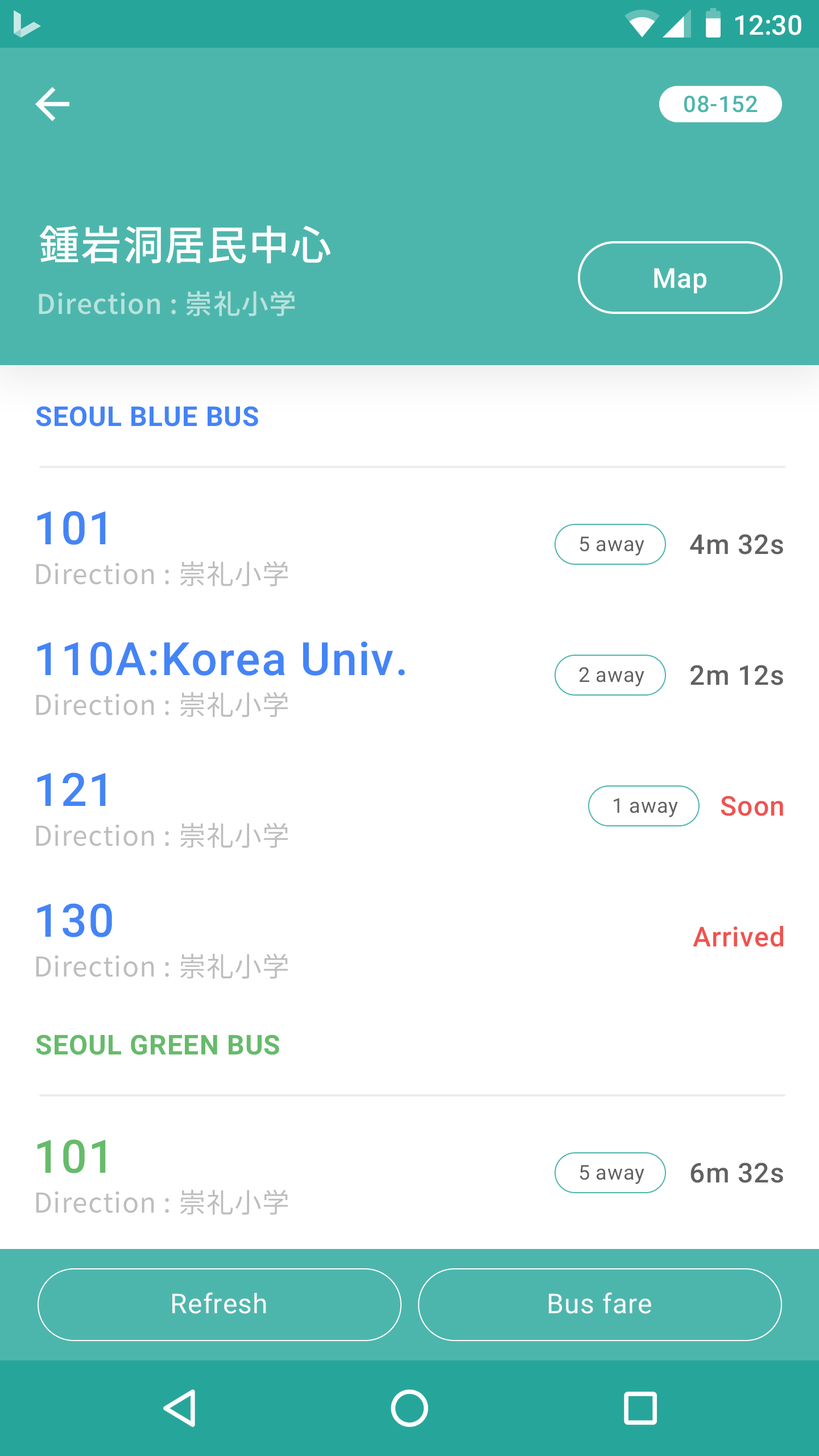
<style>
.page{position:relative;width:819px;height:1456px;background:#ffffff}
.page>*{position:absolute;margin:0}
.t1{font:27.3px "Roboto-Medium";color:#ffffff}
.t2{font:22.7px "Roboto-Medium";letter-spacing:0.025em;color:#4db6ac}
.t3{font:40.9px "NotoSansCJKkr-Medium";letter-spacing:0.025em;color:#ffffff}
.t4{font:27.3px "Roboto-Medium";letter-spacing:0.025em;color:#fafafa}
.t5{font:27.3px "NotoSansCJKkr-Medium";letter-spacing:0.025em;color:#b8e2de}
.t6{font:27.3px "Roboto-Bold";letter-spacing:0.025em;color:#4484f6}
.t7{font:46.1px "Roboto-Medium";letter-spacing:0.025em;color:#4484f6}
.t8{font:20.5px "Roboto-Regular";letter-spacing:0.025em;color:#616161}
.t9{font:27.3px "Roboto-Medium";letter-spacing:0.025em;color:#616161}
.t10{font:27.3px "NotoSansCJKkr-Regular";letter-spacing:0.025em;color:#bdbdbd}
.t11{font:27.3px "Roboto-Medium";letter-spacing:0.025em;color:#ef5350}
.t12{font:27.3px "Roboto-Bold";letter-spacing:0.025em;color:#66bb6a}
.t13{font:46.1px "Roboto-Medium";letter-spacing:0.025em;color:#66bb6a}
.t14{font:27.3px "Roboto-Regular";letter-spacing:0.025em;color:#fafafa}
</style>
<div class="page">
<p class="t1" style="left:735px;top:15px;width:66px;height:20px">12:30</p>
<p class="t2" style="left:684px;top:96px;width:74px;height:17px">08-152</p>
<p class="t3" style="left:39px;top:225px;width:292px;height:38px">鍾岩洞居民中心</p>
<p class="t4" style="left:654px;top:268px;width:53px;height:25px">Map</p>
<p class="t5" style="left:39px;top:291px;width:256px;height:25px">Direction : 崇礼小学</p>
<p class="t6" style="left:36px;top:406px;width:222px;height:21px">SEOUL BLUE BUS</p>
<p class="t7" style="left:37px;top:511px;width:69px;height:34px">101</p>
<p class="t8" style="left:580px;top:536px;width:64px;height:20px">5 away</p>
<p class="t9" style="left:690px;top:534px;width:93px;height:21px">4m 32s</p>
<p class="t10" style="left:36px;top:561px;width:252px;height:25px">Direction : 崇礼小学</p>
<p class="t7" style="left:37px;top:642px;width:368px;height:34px">110A:Korea Univ.</p>
<p class="t9" style="left:690px;top:665px;width:93px;height:20px">2m 12s</p>
<p class="t8" style="left:579px;top:667px;width:65px;height:19px">2 away</p>
<p class="t10" style="left:36px;top:692px;width:252px;height:25px">Direction : 崇礼小学</p>
<p class="t7" style="left:37px;top:772px;width:69px;height:34px">121</p>
<p class="t8" style="left:614px;top:798px;width:64px;height:19px">1 away</p>
<p class="t11" style="left:721px;top:796px;width:62px;height:20px">Soon</p>
<p class="t10" style="left:36px;top:822px;width:252px;height:26px">Direction : 崇礼小学</p>
<p class="t7" style="left:37px;top:903px;width:75px;height:34px">130</p>
<p class="t11" style="left:693px;top:926px;width:90px;height:21px">Arrived</p>
<p class="t10" style="left:36px;top:953px;width:252px;height:26px">Direction : 崇礼小学</p>
<p class="t12" style="left:36px;top:1035px;width:243px;height:20px">SEOUL GREEN BUS</p>
<p class="t13" style="left:37px;top:1139px;width:69px;height:34px">101</p>
<p class="t8" style="left:580px;top:1165px;width:64px;height:19px">5 away</p>
<p class="t9" style="left:690px;top:1163px;width:93px;height:20px">6m 32s</p>
<p class="t10" style="left:36px;top:1189px;width:252px;height:26px">Direction : 崇礼小学</p>
<p class="t14" style="left:172px;top:1292px;width:94px;height:22px">Refresh</p>
<p class="t14" style="left:549px;top:1292px;width:102px;height:22px">Bus fare</p>
</div>
